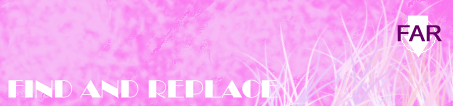
<style>
.page{position:relative;width:453px;height:106px}
.page>*{position:absolute;margin:0}
.t1{font:24px "BroadwayBT-Regular";color:#ffffff}
</style>
<div class="page">
<p class="t1" style="left:8px;top:79px;width:270px;height:19px">FIND AND REPLACE</p>
</div>
